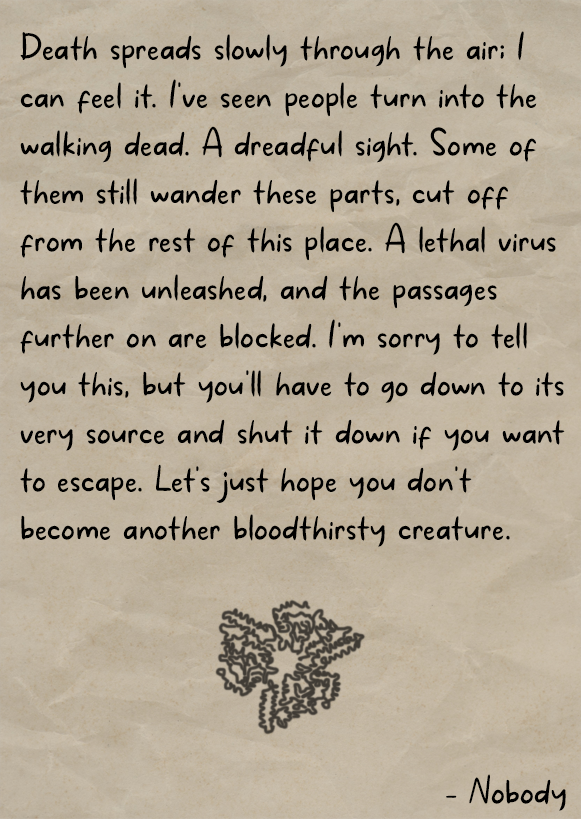
<style>
.page{position:relative;width:581px;height:819px}
.page>*{position:absolute;margin:0}
.t1{font:40px "MakanHatiCyrillicRegular";letter-spacing:0.01em;color:#000000}
</style>
<div class="page">
<p class="t1" style="left:20px;top:31px;width:545px;height:516px">Death spreads slowly through the air; I can feel it. I've seen people turn into the walking dead. A dreadful sight. Some of them still wander these parts, cut off from the rest of this place. A lethal virus has been unleashed, and the passages further on are blocked. I'm sorry to tell you this, but you'll have to до down to its very source and shut it down if you want to escape. Let's just hope you don't become another bloodthirsty creature.</p>
<p class="t1" style="left:446px;top:774px;width:120px;height:37px">- Nobody</p>
</div>
